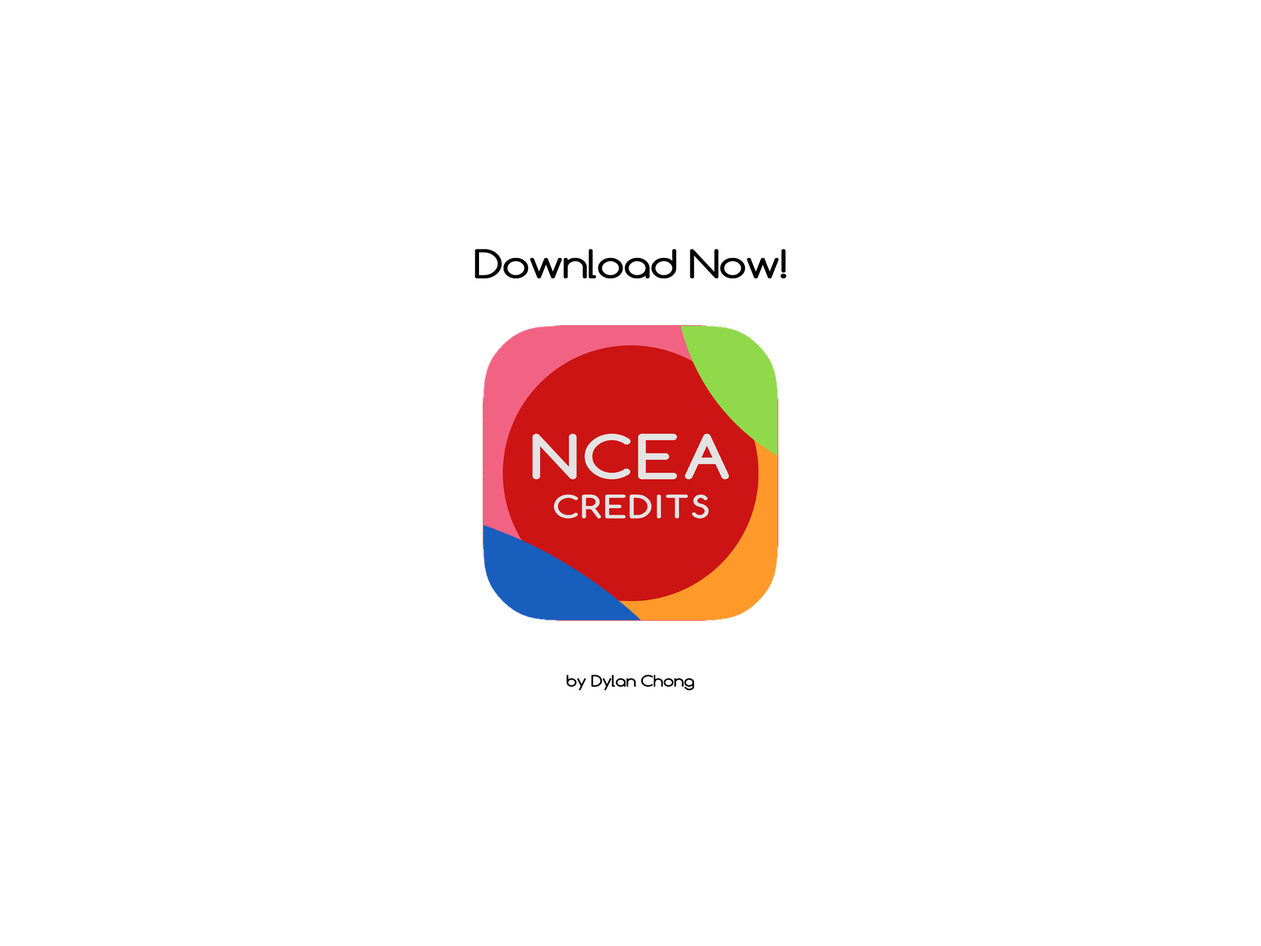
<style>
.page{position:relative;width:1261px;height:946px;background:#ffffff}
.page>*{position:absolute;margin:0}
.t1{font:36.9px "Comfortaa";letter-spacing:-0.05em;color:#000000;font-weight:bold;scale:1.2 1}
.t2{font:14.8px "Comfortaa";letter-spacing:-0.05em;color:#000000;font-weight:bold;scale:1.2 1}
</style>
<div class="page">
<p class="t1" style="left:475px;top:249px;width:311px;height:29px">Download Now!</p>
<p class="t2" style="left:566px;top:674px;width:128px;height:16px">by Dylan Chong</p>
</div>
